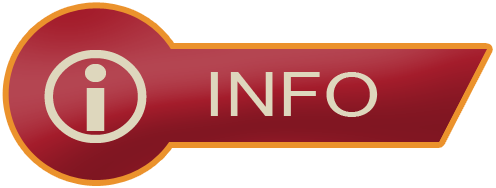
<style>
.page{position:relative;width:496px;height:188px;background:#ffffff}
.page>*{position:absolute;margin:0}
.t1{font:66.8px "Shruti";color:#ded7bd;scale:1.19 1}
</style>
<div class="page">
<p class="t1" style="left:210px;top:72px;width:168px;height:45px">INFO</p>
</div>
